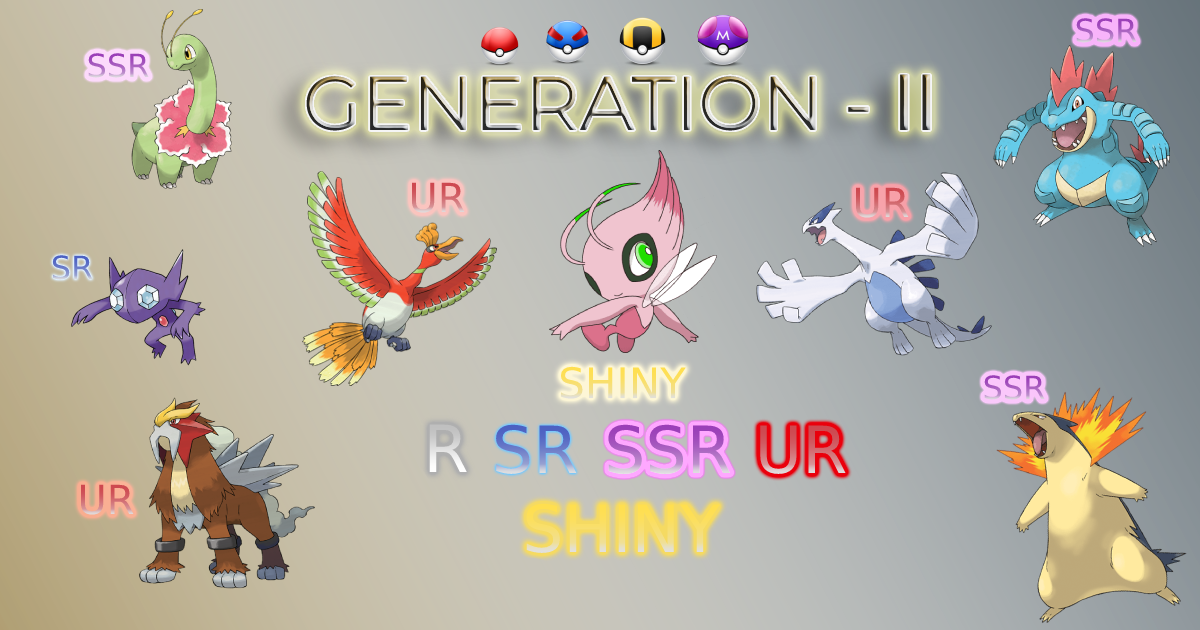
<style>
.page{position:relative;width:1200px;height:630px}
.page>*{position:absolute;margin:0}
.t1{font:32px "DejaVuSans"}
.t2{font:76px "Montserrat-Regular"}
.t3{font:76px "DejaVuSans"}
.t4{font:40px "DejaVuSans"}
.t5{font:42px "DejaVuSans"}
</style>
<div class="page">
<p class="t1" style="left:1076px;top:18px;width:61px;height:25px">SSR</p>
<p class="t1" style="left:88px;top:53px;width:61px;height:25px">SSR</p>
<p class="t2" style="left:306px;top:74px;width:625px;height:57px">GENERATION - <span class="t3">Ⅰ</span><span class="t3">Ⅰ</span></p>
<p class="t4" style="left:411px;top:182px;width:54px;height:31px">UR</p>
<p class="t4" style="left:855px;top:187px;width:54px;height:31px">UR</p>
<p class="t1" style="left:52px;top:255px;width:41px;height:25px">SR</p>
<p class="t5" style="left:560px;top:366px;width:126px;height:33px">SHINY</p>
<p class="t1" style="left:984px;top:375px;width:61px;height:25px">SSR</p>
<p class="t4" style="left:80px;top:484px;width:54px;height:31px">UR</p>
</div>
